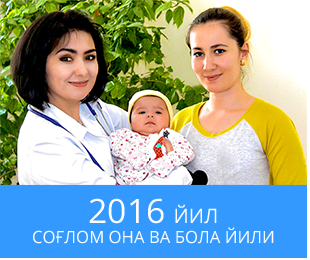
<style>
.page{position:relative;width:310px;height:260px;background:#3399fe}
.page>*{position:absolute;margin:0}
.t1{font:16.7px "OpenSans";color:#ffffff}
.t2{font:33.5px "OpenSans";color:#ffffff}
.t3{font:20.1px "OpenSans";color:#ffffff}
</style>
<div class="page">
<p class="t1" style="left:33px;top:198px;width:241px;height:46px;text-align:center"><span class="t2">2016 </span><span class="t3">ЙИЛ<br></span>СОҒЛОМ ОНА ВА БОЛА ЙИЛИ</p>
</div>
